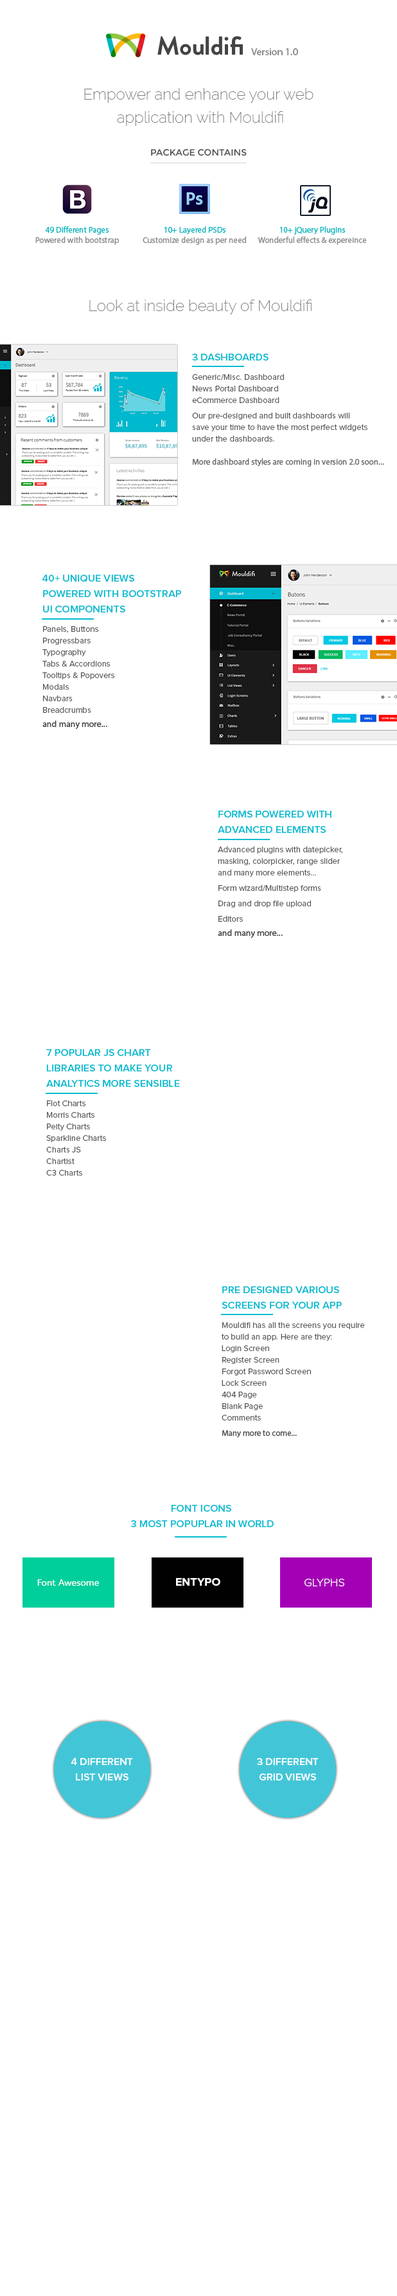
<style>
.page{position:relative;width:397px;height:2296px;background:#ffffff}
.page>*{position:absolute;margin:0}
.t1{font:10.3px "MyriadHebrew-Regular";color:#898989}
.t2{font:15.4px/23.1px "Raleway-ExtraLight";color:#7b7b7b}
.t3{font:9px "Montserrat-Regular";color:#4e4e4e;text-transform:uppercase}
.t4{font:8.4px/10.3px "MyriadHebrew-Regular";color:#8c8c8c}
.t5{font:8.4px/11.6px "MyriadHebrew-Regular";color:#01b6bf}
.t6{font:15.4px "Raleway-ExtraLight";color:#7b7b7b}
.t7{font:8.4px/11.6px "ProximaNova-Regular";color:#555555}
.t8{font:10.3px/11.6px "ProximaNova-Semibold";color:#00bcd1;text-transform:uppercase}
.t9{font:8.4px/19.3px "ProximaNova-Regular";color:#555555}
.t10{font:8.4px/15.4px "ProximaNova-Regular";color:#555555}
.t11{font:8.4px/11.6px "MyriadHebrew-Regular";color:#696969}
.t12{font:10.3px/15.4px "ProximaNova-Semibold";color:#00bcd1;text-transform:uppercase}
.t13{font:9px/14.1px "MyriadHebrew-Regular";color:#424040}
.t14{font:8.4px/15.4px "MyriadHebrew-Regular";color:#4d4d4d}
.t15{font:9px "ABeeZee-Regular";color:#ffffff}
.t16{font:11.6px "ProximaNova-Bold";color:#ffffff;text-transform:uppercase}
.t17{font:11.6px "ProximaNova-Light";color:#ffffff;text-transform:uppercase}
.t18{font:10.3px/11.6px "ProximaNova-Semibold";color:#ffffff;text-transform:uppercase}
</style>
<div class="page">
<p class="t1" style="left:251px;top:48px;width:47px;height:7px">Version 1.0</p>
<p class="t2" style="left:84px;top:88px;width:230px;height:38px;text-align:center">Empower and enhance your web <br>application with Mouldifi</p>
<p class="t3" style="left:151px;top:149px;width:96px;height:7px">package contains</p>
<p class="t4" style="left:35px;top:226px;width:85px;height:19px;text-align:center"><span class="t5">49 Different Pages<br></span>Powered with bootstrap</p>
<p class="t4" style="left:143px;top:226px;width:104px;height:19px;text-align:center"><span class="t5">10+ Layered PSDs<br></span>Customize design as per need</p>
<p class="t4" style="left:258px;top:226px;width:109px;height:19px;text-align:center"><span class="t5">10+ jQuery Plugins<br></span>Wonderful effects &amp; expereince</p>
<p class="t6" style="left:89px;top:300px;width:223px;height:14px">Look at inside beauty of Mouldifi</p>
<p class="t7" style="left:192px;top:354px;width:192px;height:113px"><span class="t8">3 Dashboards<br></span><span class="t9">Generic/Misc. Dashboard<br></span>News Portal Dashboard<br>eCommerce Dashboard<br><span class="t10">Our pre-designed and built dashboards will <br></span>save your time to have the most perfect widgets <br>under the dashboards. <br><br><span class="t11">More dashboard styles are coming in version 2.0 soon...</span></p>
<p class="t7" style="left:42px;top:575px;width:140px;height:154px"><span class="t8">40+ Unique Views<br></span><span class="t12">Powered with bootstrap <br>UI components<br></span><span class="t9">Panels, Buttons <br></span>Progressbars<br>Typography<br>Tabs &amp; Accordions<br>Tooltips &amp; Popovers<br>Modals<br>Navbars<br>Breadcrumbs<br><span class="t13">and many more...</span></p>
<p class="t10" style="left:218px;top:811px;width:125px;height:127px"><span class="t8">Forms Powered with<br></span><span class="t12">advanced elements<br></span><span class="t9">Advanced plugins with datepicker,<br></span><span class="t7">masking, colorpicker, range slider<br>and many more elements...<br></span>Form wizard/Multistep forms<br>Drag and drop file upload<br>Editors<br><span class="t13">and many more...</span></p>
<p class="t7" style="left:46px;top:1049px;width:134px;height:127px"><span class="t8">7 popular JS chart<br></span><span class="t12">libraries to make your<br>analytics more sensible<br></span><span class="t9">Flot Charts<br></span>Morris Charts<br>Peity Charts<br>Sparkline Charts<br>Charts JS<br>Chartist<br>C3 Charts</p>
<p class="t7" style="left:222px;top:1286px;width:143px;height:152px"><span class="t8">Pre designed </span><span class="t12">Various <br>SCreens for your app<br></span><span class="t9">Mouldifi has all the screens you require <br></span>to build an app. Here are they:<br>Login Screen<br>Register Screen<br>Forgot Password Screen<br>Lock Screen<br>404 Page<br>Blank Page<br>Comments<br><span class="t14">Many more to come...</span></p>
<p class="t12" style="left:131px;top:1505px;width:143px;height:22px;text-align:center"><span class="t8">font icons</span> <br>3 most popuplar in world</p>
<p class="t15" style="left:37px;top:1580px;width:62px;height:6px">Font Awesome</p>
<p class="t16" style="left:176px;top:1578px;width:45px;height:8px">entypo</p>
<p class="t17" style="left:305px;top:1579px;width:40px;height:8px">glyphs</p>
<p class="t18" style="left:71px;top:1758px;width:62px;height:23px;text-align:center">4 different <br>list views</p>
<p class="t18" style="left:257px;top:1758px;width:62px;height:23px;text-align:center">3 different <br>grid views</p>
</div>
